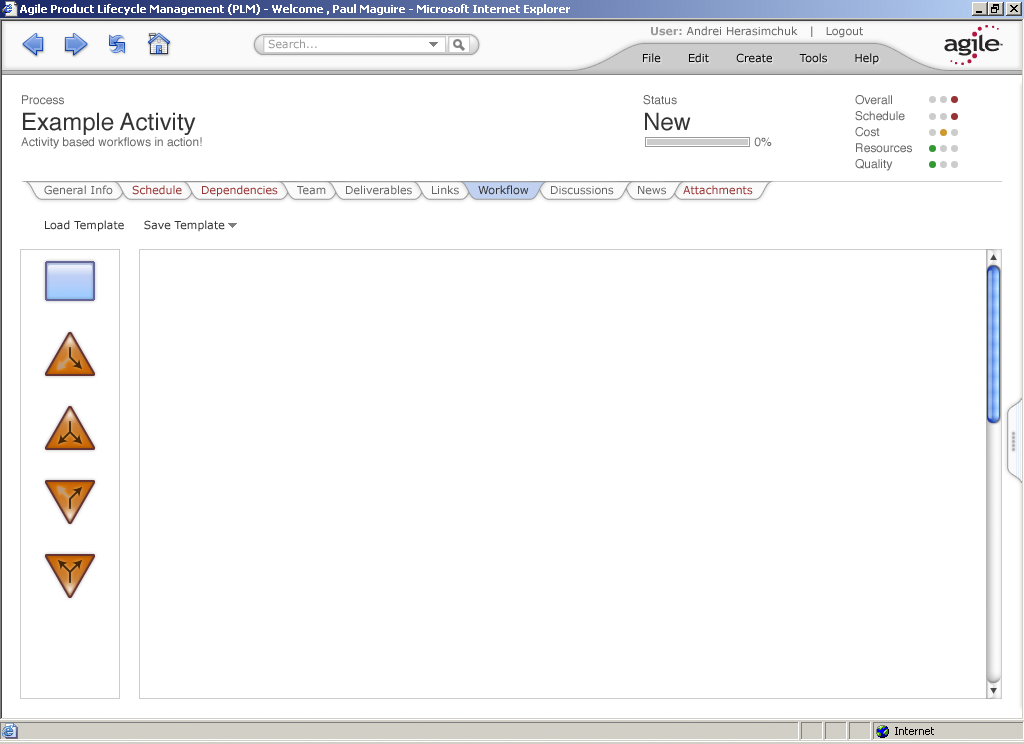
<style>
.page{position:relative;width:1024px;height:744px;background:#ffffff}
.page>*{position:absolute;margin:0}
.t1{font:11px "Verdana";color:#666666}
.t2{font:11px "Verdana-Bold";color:#999999}
.t3{font:11px "Verdana";color:#999999}
.t4{font:11px "Verdana";color:#000000}
.t5{font:12px/16px "Helvetica";color:#666666}
.t6{font:24px/26px "Helvetica";color:#333333}
.t7{font:32px/16px "Helvetica";color:#cccccc}
.t8{font:32px/16px "Helvetica";color:#993333}
.t9{font:32px/16px "Helvetica";color:#cc9933}
.t10{font:32px/16px "Helvetica";color:#339933}
.t11{font:11px "Verdana";color:#993333}
.t12{font:11px "Verdana";color:#333333}
</style>
<div class="page">
<p class="t1" style="left:651px;top:26px;width:212px;height:12px"><span class="t2">User: </span>Andrei Herasimchuk   |   Logout</p>
<p class="t3" style="left:268px;top:39px;width:49px;height:10px">Search...</p>
<p class="t4" style="left:643px;top:53px;width:236px;height:12px">File       Edit       Create       Tools       Help</p>
<p class="t5" style="left:21px;top:95px;width:181px;height:54px">Process<br><span class="t6">Example Activity<br></span>Activity based workflows in action!</p>
<p class="t5" style="left:643px;top:95px;width:129px;height:52px">Status<br><span class="t6">New<br></span>    0%</p>
<p class="t5" style="left:855px;top:95px;width:103px;height:76px">Overall <span class="t7">••</span><span class="t8">•<br></span>Schedule <span class="t7">••</span><span class="t8">•<br></span>Cost  <span class="t7">•</span><span class="t9">•</span><span class="t7">•<br></span>Resources <span class="t10">•</span><span class="t7">••<br></span>Quality <span class="t10">•</span><span class="t7">••</span></p>
<p class="t1" style="left:44px;top:185px;width:69px;height:10px">General Info</p>
<p class="t11" style="left:132px;top:185px;width:50px;height:10px">Schedule</p>
<p class="t11" style="left:202px;top:185px;width:76px;height:12px">Dependencies</p>
<p class="t1" style="left:346px;top:185px;width:66px;height:10px">Deliverables</p>
<p class="t1" style="left:432px;top:185px;width:27px;height:10px">Links</p>
<p class="t12" style="left:478px;top:185px;width:51px;height:10px">Workflow</p>
<p class="t11" style="left:683px;top:185px;width:70px;height:10px">Attachments</p>
<p class="t1" style="left:297px;top:186px;width:29px;height:9px">Team</p>
<p class="t1" style="left:551px;top:186px;width:63px;height:9px">Discussions</p>
<p class="t1" style="left:638px;top:186px;width:28px;height:9px">News</p>
<p class="t12" style="left:45px;top:220px;width:180px;height:12px">Load Template     Save Template</p>
</div>
